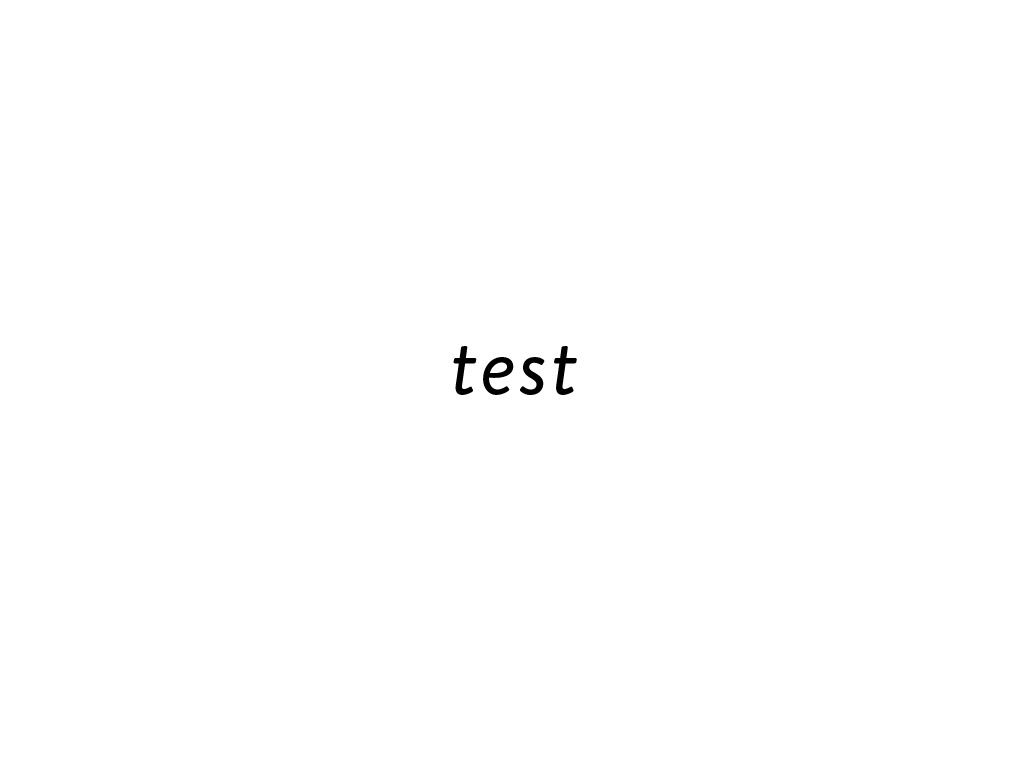
<style>
.page{position:relative;width:1024px;height:768px;background:#ffffff}
.page>*{position:absolute;margin:0}
.t1{font:90px "BrandonGrotesque-RegularItalic";letter-spacing:0.02em;color:#000000}
</style>
<div class="page">
<p class="t1" style="left:453px;top:346px;width:124px;height:49px">test</p>
</div>
